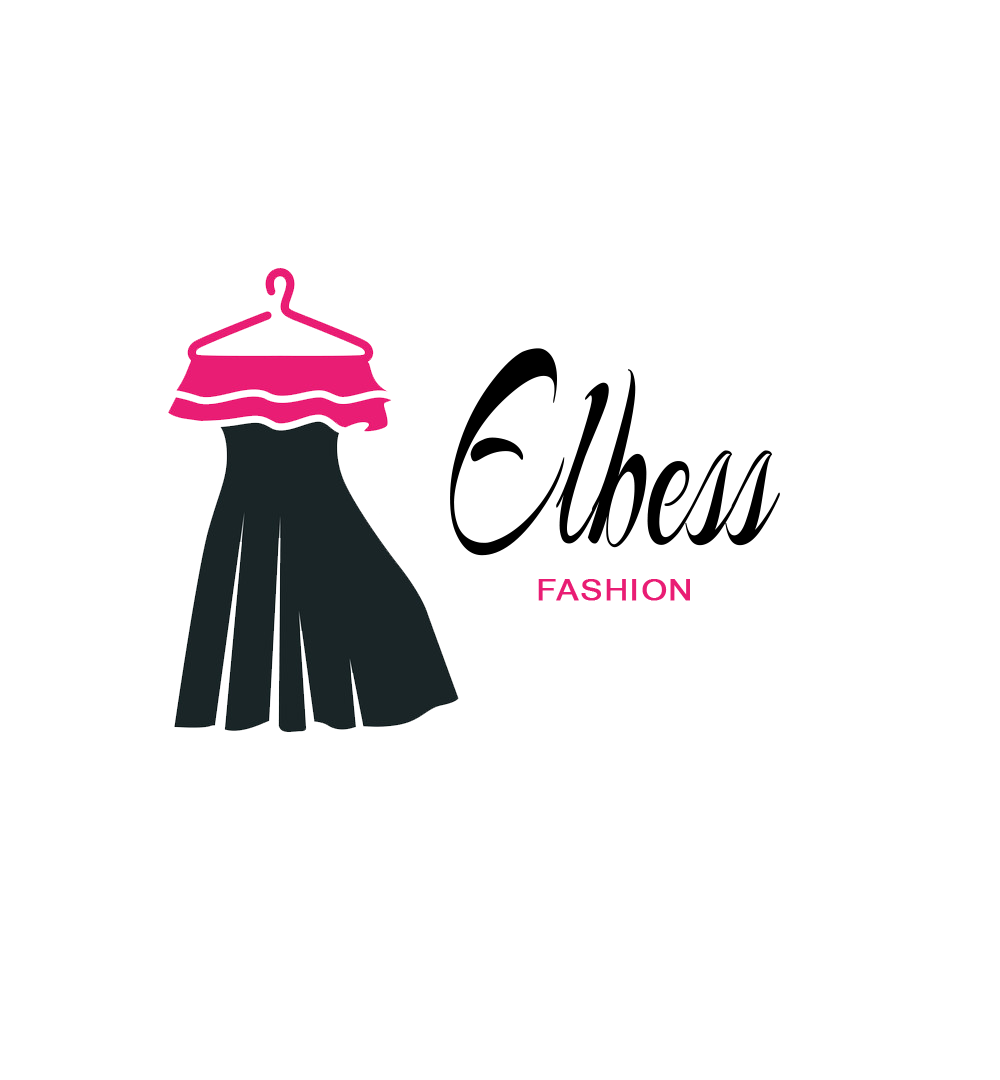
<style>
.page{position:relative;width:1000px;height:1080px;background:#ffffff}
.page>*{position:absolute;margin:0}
.t1{font:286.2px "Arizonia-Regular";color:#000000;scale:0.46 1}
.t2{font:28.6px "ArialMT";color:#e91d74;text-transform:uppercase;font-weight:bold;scale:1.15 1}
</style>
<div class="page">
<p class="t1" style="left:450px;top:348px;width:330px;height:208px">Elbess</p>
<p class="t2" style="left:538px;top:579px;width:152px;height:22px">Fashion</p>
</div>
